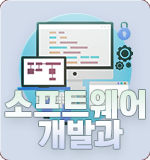
<style>
.page{position:relative;width:150px;height:160px;background:#d3dceb}
.page>*{position:absolute;margin:0}
.t1{font:32px/30px "KoreanTITGD5-R";letter-spacing:-0.01em;color:#ffffff}
</style>
<div class="page">
<p class="t1" style="left:5px;top:90px;width:140px;height:59px;text-align:center">소프트웨어 <br>개발과</p>
</div>
